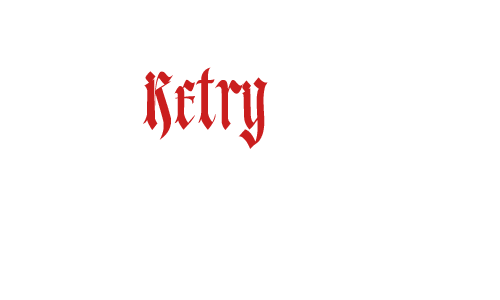
<style>
.page{position:relative;width:500px;height:300px;background:#ffffff}
.page>*{position:absolute;margin:0}
.t1{font:72px "Blacktonespersonaluse";color:#ca1e1e}
</style>
<div class="page">
<p class="t1" style="left:143px;top:67px;width:125px;height:82px">Retry</p>
</div>
